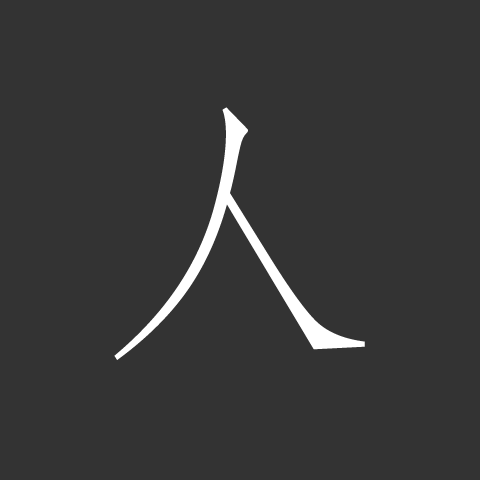
<style>
.page{position:relative;width:480px;height:480px;background:#333333}
.page>*{position:absolute;margin:0}
.t1{font:288px "STFangsong";color:#ffffff}
</style>
<div class="page">
<p class="t1" style="left:114px;top:107px;width:251px;height:253px">人</p>
</div>
